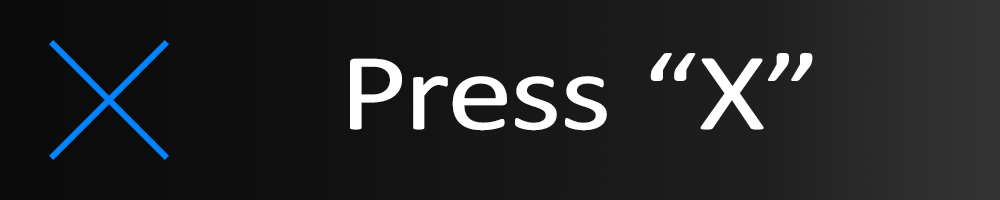
<style>
.page{position:relative;width:1000px;height:200px}
.page>*{position:absolute;margin:0}
.t1{font:111.1px "Calibri";color:#ffffff;scale:1.2 1}
</style>
<div class="page">
<p class="t1" style="left:350px;top:53px;width:463px;height:78px">Press “X”</p>
</div>
